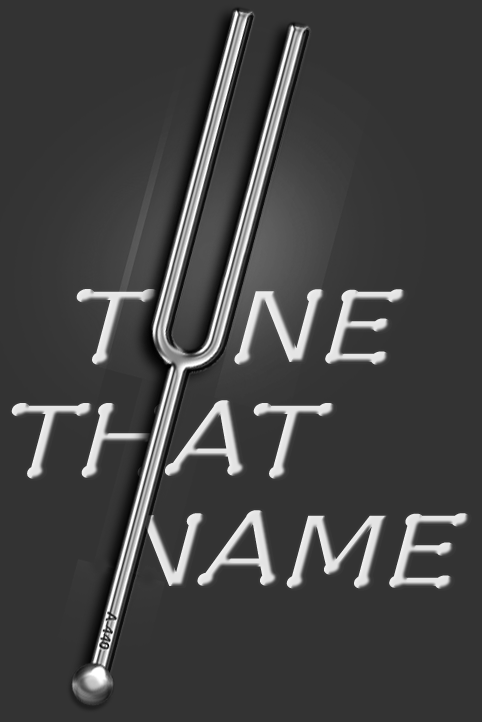
<style>
.page{position:relative;width:482px;height:722px;background:#333333}
.page>*{position:absolute;margin:0}
.t1{font:126px "DrummonItalic"}
</style>
<div class="page">
<p class="t1" style="left:76px;top:289px;width:330px;height:76px">TUNE</p>
<p class="t1" style="left:11px;top:400px;width:324px;height:79px">THAT</p>
<p class="t1" style="left:114px;top:510px;width:356px;height:79px">NAME</p>
</div>
